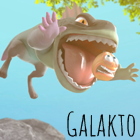
<style>
.page{position:relative;width:140px;height:140px}
.page>*{position:absolute;margin:0}
.t1{font:32px "AmaticSC-Regular";color:#000000}
</style>
<div class="page">
<p class="t1" style="left:67px;top:111px;width:68px;height:26px">Galakto</p>
</div>
